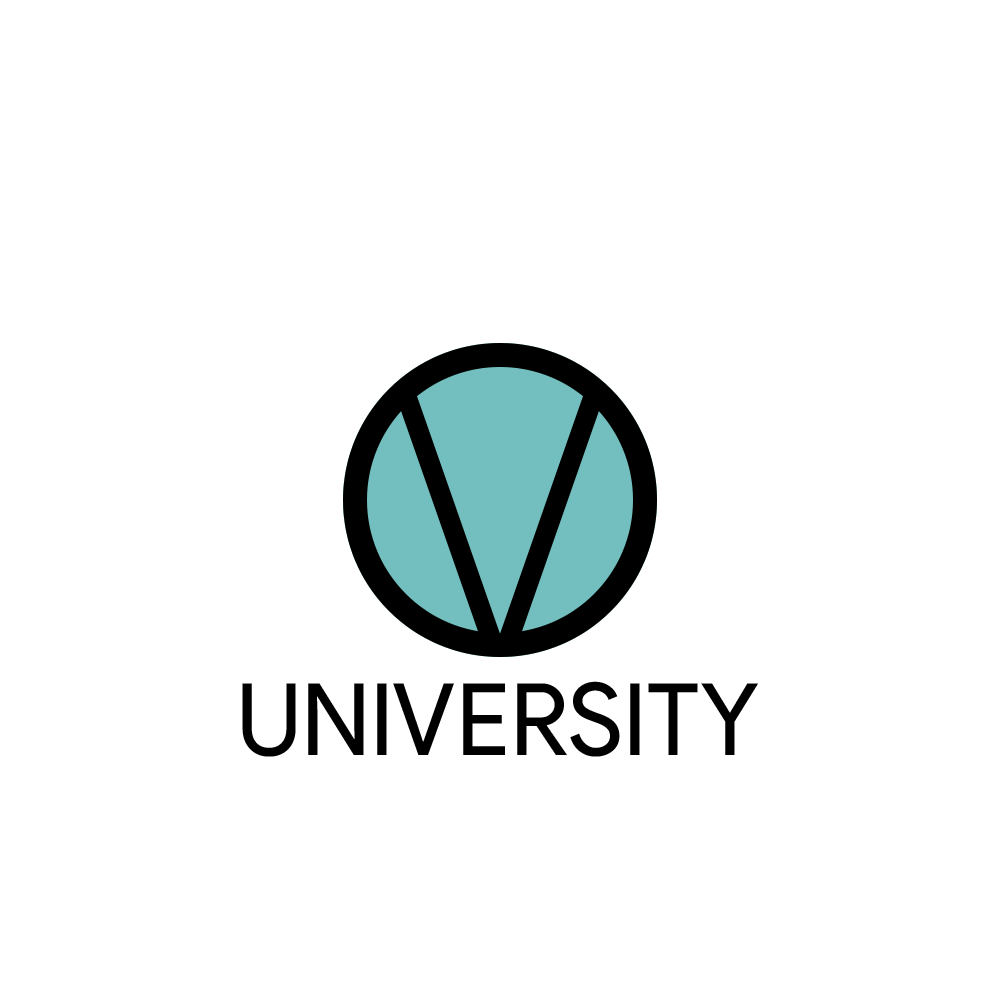
<style>
.page{position:relative;width:1000px;height:1000px;background:#ffffff}
.page>*{position:absolute;margin:0}
.t1{font:100px "ProductSans-Regular";color:#000000}
</style>
<div class="page">
<p class="t1" style="left:242px;top:681px;width:516px;height:76px">UNIVERSITY</p>
</div>
